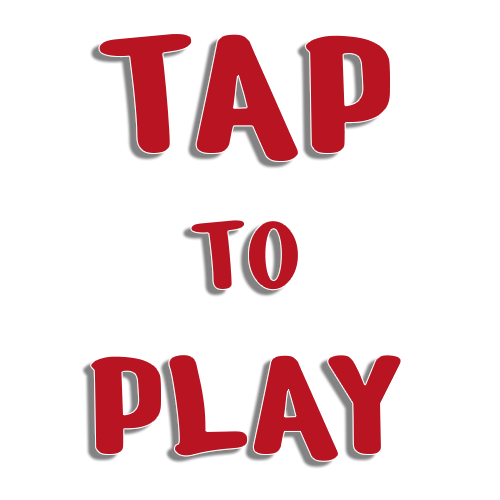
<style>
.page{position:relative;width:500px;height:500px;background:#ffffff}
.page>*{position:absolute;margin:0}
.t1{font:171px/164.2px "NerkoOne-Regular";color:#b91422;font-variant:small-caps}
.t2{font:205.2px/136.8px "NerkoOne-Regular";color:#b91422;font-variant:small-caps}
.t3{font:171px/136.8px "NerkoOne-Regular";color:#b91422;font-variant:small-caps}
</style>
<div class="page">
<p class="t1" style="left:90px;top:33px;width:312px;height:429px;text-align:center"><span class="t2">TAP<br></span><span class="t3">to<br></span>PLAY</p>
</div>
